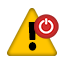
<style>
.page{position:relative;width:64px;height:64px;background:#ffffff}
.page>*{position:absolute;margin:0}
.t1{font:40.4px "MADETOMMY-Black";color:#000000;font-variant:small-caps;scale:0.86 1}
</style>
<div class="page">
<p class="t1" style="left:28px;top:22px;width:9px;height:29px">!</p>
</div>
